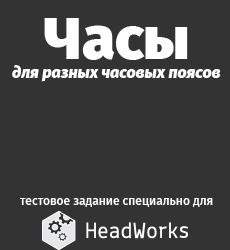
<style>
.page{position:relative;width:230px;height:250px;background:#333333}
.page>*{position:absolute;margin:0}
.t1{font:60px "FiraSans-Heavy";color:#ffffff}
.t2{font:16px "FiraSans-HeavyItalic";color:#ffffff}
.t3{font:12px "FiraSans-Medium";color:#ffffff}
</style>
<div class="page">
<p class="t1" style="left:44px;top:18px;width:144px;height:42px">Часы</p>
<p class="t2" style="left:12px;top:65px;width:209px;height:17px">для разных часовых поясов</p>
<p class="t3" style="left:20px;top:198px;width:193px;height:9px">тестовое задание специально для</p>
</div>
